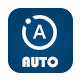
<style>
.page{position:relative;width:80px;height:80px;background:#ffffff}
.page>*{position:absolute;margin:0}
.t1{font:15px "Bauhaus93";color:#ffffff}
</style>
<div class="page">
<p class="t1" style="left:22px;top:56px;width:36px;height:12px">AUTO</p>
</div>
